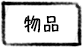
<style>
.page{position:relative;width:83px;height:47px;background:#ffffff}
.page>*{position:absolute;margin:0}
.t1{font:18px "HannotateSC-W7";letter-spacing:0.055em;color:#000000}
</style>
<div class="page">
<p class="t1" style="left:24px;top:15px;width:35px;height:18px">物品</p>
</div>
